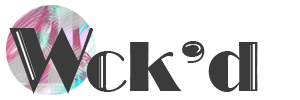
<style>
.page{position:relative;width:300px;height:100px;background:#ffffff}
.page>*{position:absolute;margin:0}
.t1{font:93px "Broadway";color:#3b3b3b;scale:0.87 1}
.t2{font:73px "Broadway";color:#3b3b3b}
</style>
<div class="page">
<p class="t1" style="left:9px;top:27px;width:85px;height:67px">W</p>
<p class="t2" style="left:86px;top:41px;width:172px;height:51px">ck’d</p>
</div>
